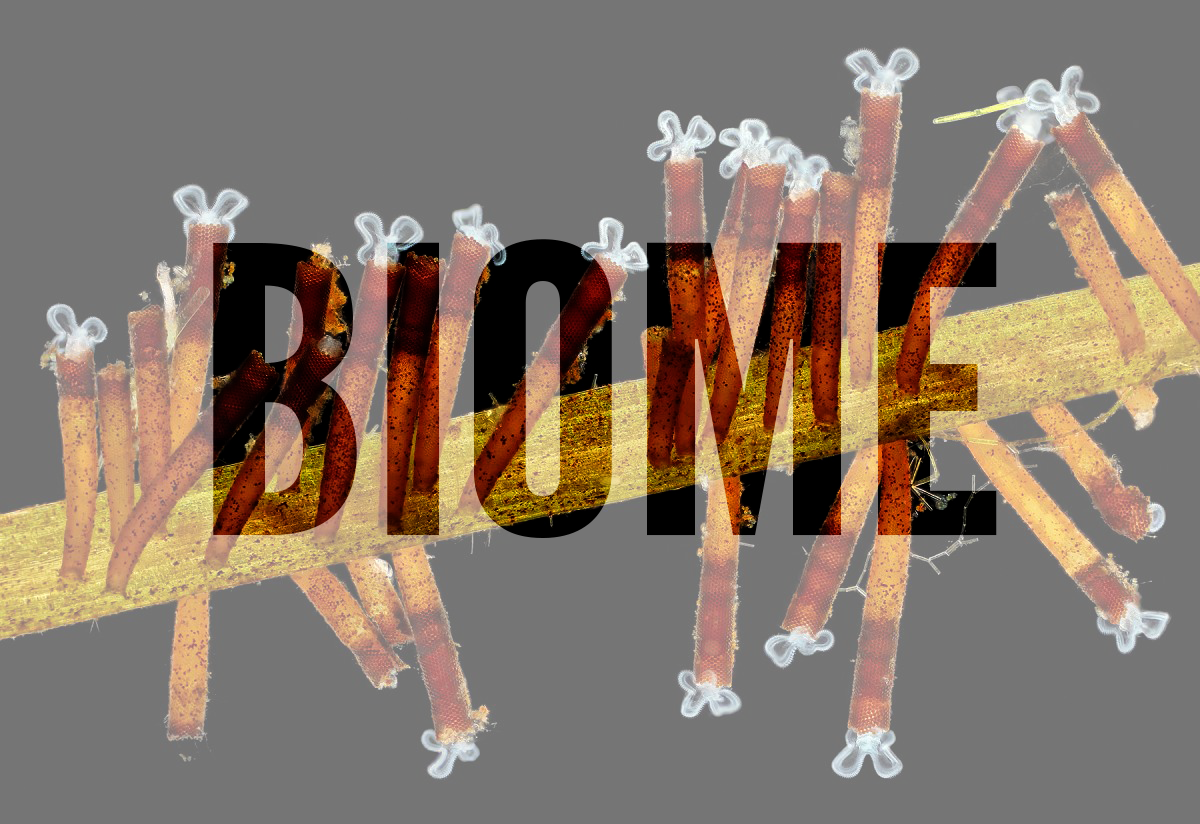
<style>
.page{position:relative;width:1200px;height:824px;background:#757575}
.page>*{position:absolute;margin:0}
.t1{font:397.5px "WarsawGothic";scale:1.2 1}
</style>
<div class="page">
<p class="t1" style="left:213px;top:239px;width:784px;height:299px">BIOME</p>
</div>
